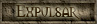
<style>
.page{position:relative;width:97px;height:24px}
.page>*{position:absolute;margin:0}
.t1{font:16px "Morpheus"}
</style>
<div class="page">
<p class="t1" style="left:16px;top:5px;width:65px;height:14px">Expulsar</p>
</div>
